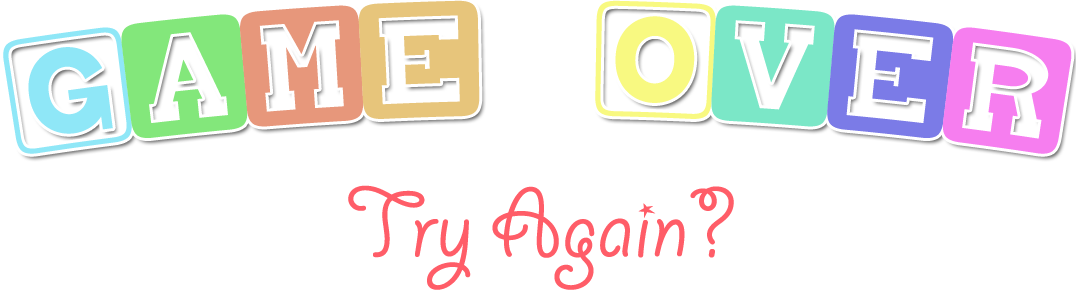
<style>
.page{position:relative;width:1076px;height:294px;background:#ffffff}
.page>*{position:absolute;margin:0}
.t1{font:96px "babybloc";color:#8fe7f7}
.t2{font:96px "babybloc";color:#83e77b}
.t3{font:96px "babybloc";color:#e7977b}
.t4{font:96px "babybloc";color:#e7c57b}
.t5{font:96px "babybloc";color:#f8f981}
.t6{font:96px "babybloc";color:#7be7c7}
.t7{font:96px "babybloc";color:#7b7be7}
.t8{font:96px "babybloc";color:#f67eef}
.t9{font:108px "GiddyupStd";color:#ff5d68}
</style>
<div class="page">
<p class="t1" style="left:3px;top:0px;width:1069px;height:154px">G<span class="t2">a</span><span class="t3">m</span><span class="t4">e </span><span class="t5">O</span><span class="t6">v</span><span class="t7">e</span><span class="t8">r</span></p>
<p class="t9" style="left:348px;top:185px;width:386px;height:105px">Try Again?</p>
</div>
